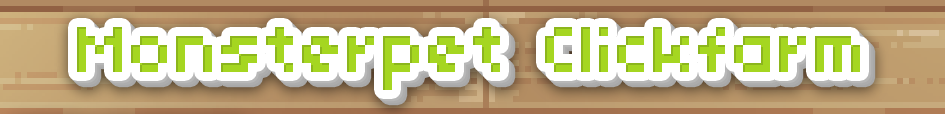
<style>
.page{position:relative;width:945px;height:114px;background:#ffffff}
.page>*{position:absolute;margin:0}
.t1{font:72px "04b03";color:#a5d621}
</style>
<div class="page">
<p class="t1" style="left:77px;top:27px;width:783px;height:63px">Monsterpet Clickfarm</p>
</div>
